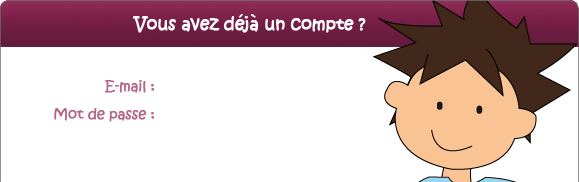
<style>
.page{position:relative;width:579px;height:182px;background:#ffffff}
.page>*{position:absolute;margin:0}
.t1{font:17px "KristenITC-Regular";letter-spacing:-0.02em;color:#ffffff;font-weight:bold}
.t2{font:14px/27.4px "KristenITC-Regular";letter-spacing:-0.02em;color:#b56488;font-weight:bold}
</style>
<div class="page">
<p class="t1" style="left:132px;top:14px;width:234px;height:19px">Vous avez déjà un compte ?</p>
<p class="t2" style="left:54px;top:80px;width:101px;height:42px;text-align:right">E-mail :<br>Mot de passe :</p>
</div>
